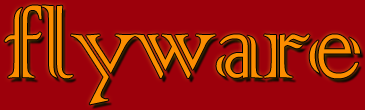
<style>
.page{position:relative;width:365px;height:110px;background:#9c000b}
.page>*{position:absolute;margin:0}
.t1{font:120px "ColonnaMT";letter-spacing:-0.025em;color:#fb8e00}
</style>
<div class="page">
<p class="t1" style="left:4px;top:5px;width:357px;height:100px">flyware</p>
</div>
